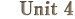
<style>
.page{position:relative;width:75px;height:19px;background:#ffffff}
.page>*{position:absolute;margin:0}
.t1{font:18px "RyuminPro-ExBold";font-weight:bold}
</style>
<div class="page">
<p class="t1" style="left:19px;top:1px;width:55px;height:15px">Unit 4</p>
</div>
